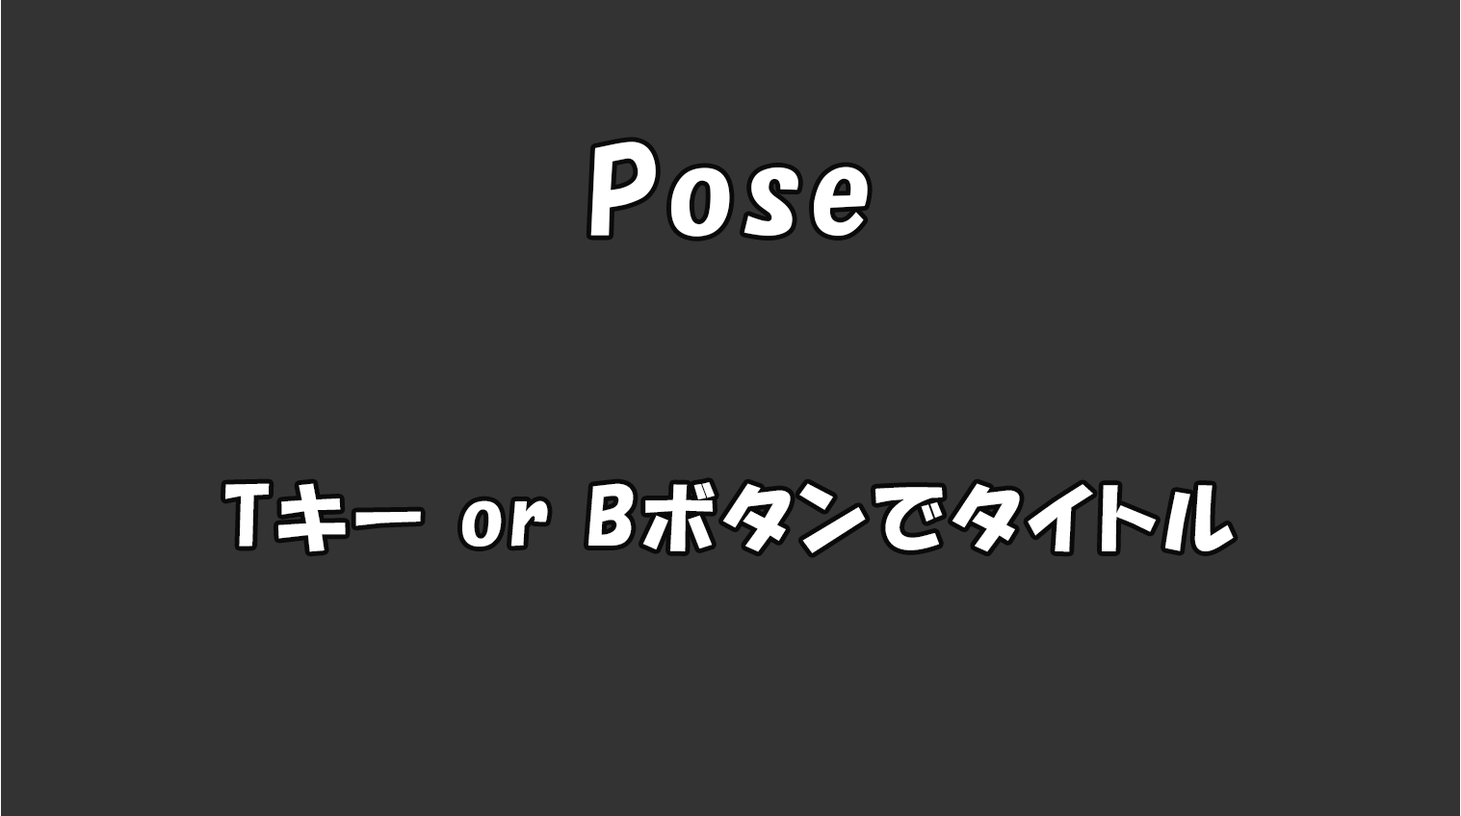
<style>
.page{position:relative;width:1461px;height:816px;background:#333333}
.page>*{position:absolute;margin:0}
.t1{font:115.5px "HGPSoeiKakupoptai";letter-spacing:0.08em;color:#ffffff}
.t2{font:77px "HGPSoeiKakupoptai";letter-spacing:0.08em;color:#ffffff}
</style>
<div class="page">
<p class="t1" style="left:590px;top:142px;width:277px;height:95px">Pose</p>
<p class="t2" style="left:225px;top:482px;width:1008px;height:72px">Tキー or Bボタンでタイトル</p>
</div>
